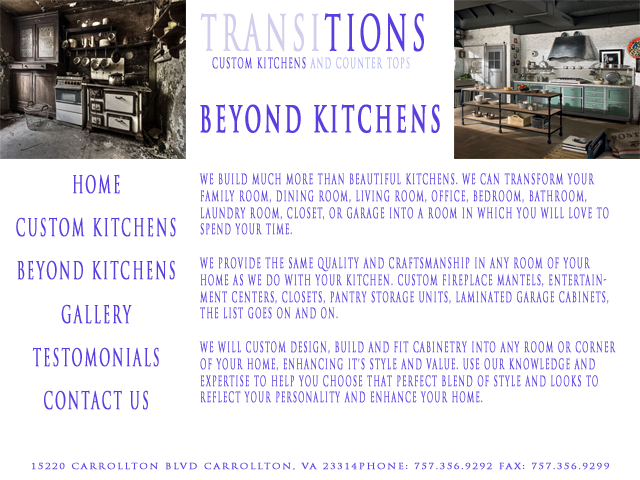
<style>
.page{position:relative;width:640px;height:480px;background:#ffffff}
.page>*{position:absolute;margin:0}
.t1{font:48px "TrajanPro-Regular";letter-spacing:0.15em;color:#d4ceed;text-transform:uppercase;font-weight:bold;scale:0.5 1}
.t2{font:48px "TrajanPro-Regular";letter-spacing:0.15em;color:#5b3de0;text-transform:uppercase;font-weight:bold;scale:0.5 1}
.t3{font:14px "TrajanPro-Regular";letter-spacing:0.15em;color:#5b3de0;text-transform:uppercase;font-weight:bold;scale:0.5 1}
.t4{font:14px "TrajanPro-Regular";letter-spacing:0.15em;color:#b2b4f4;text-transform:uppercase;font-weight:bold;scale:0.5 1}
.t5{font:14px "TrajanPro-Regular";letter-spacing:0.15em;color:#ccc3f2;text-transform:uppercase;font-weight:bold;scale:0.5 1}
.t6{font:36px "TrajanPro-Bold";letter-spacing:0.15em;color:#5b3de0;text-transform:uppercase;font-weight:bold;scale:0.5 1}
.t7{font:24px "TrajanPro-Regular";letter-spacing:0.15em;color:#5b3de0;text-transform:uppercase;font-weight:bold;scale:0.5 1}
.t8{font:8px "TrajanPro-Regular";letter-spacing:0.15em;color:#5b3de0;text-transform:uppercase;font-weight:bold;scale:1.19 1}
</style>
<div class="page">
<p class="t1" style="left:200px;top:13px;width:224px;height:39px">Transi<span class="t2">tions</span></p>
<p class="t3" style="left:212px;top:57px;width:198px;height:12px">Custom Kitchens <span class="t4">and Counter Top</span><span class="t5">s</span></p>
<p class="t6" style="left:200px;top:104px;width:240px;height:29px">BeYond Kitchens</p>
<p class="t7" style="left:16px;top:174px;width:160px;height:236px;text-align:center">HOme<br><br>Custom Kitchens<br><br>Beyond Kitchens<br><br>Gallery<br><br>Testomonials<br><br>Contact Us</p>
<p class="t3" style="left:199px;top:173px;width:417px;height:230px">We build much more than beautiful kitchens. We can transform your Family Room, Dining Room, Living Room, Office, Bedroom, Bathroom, Laundry Room, Closet, or Garage into a room in which you will love to spend your time.<br><br>We provide the same quality and craftsmanship in any room of your home as we do with your kitchen. Custom fireplace mantels, entertainment centers, closets, pantry storage units, laminated garage cabinets, the list goes on and on.<br><br>We will custom design, build and fit cabinetry into any room or corner of your home, enhancing it's style and value. Use our knowledge and expertise to help you choose that perfect blend of style and looks to reflect your personality and enhance your home.</p>
<p class="t8" style="left:32px;top:462px;width:577px;height:8px">15220 Carrollton Blvd Carrollton, VA 23314Phone: 757.356.9292 Fax: 757.356.9299</p>
</div>
